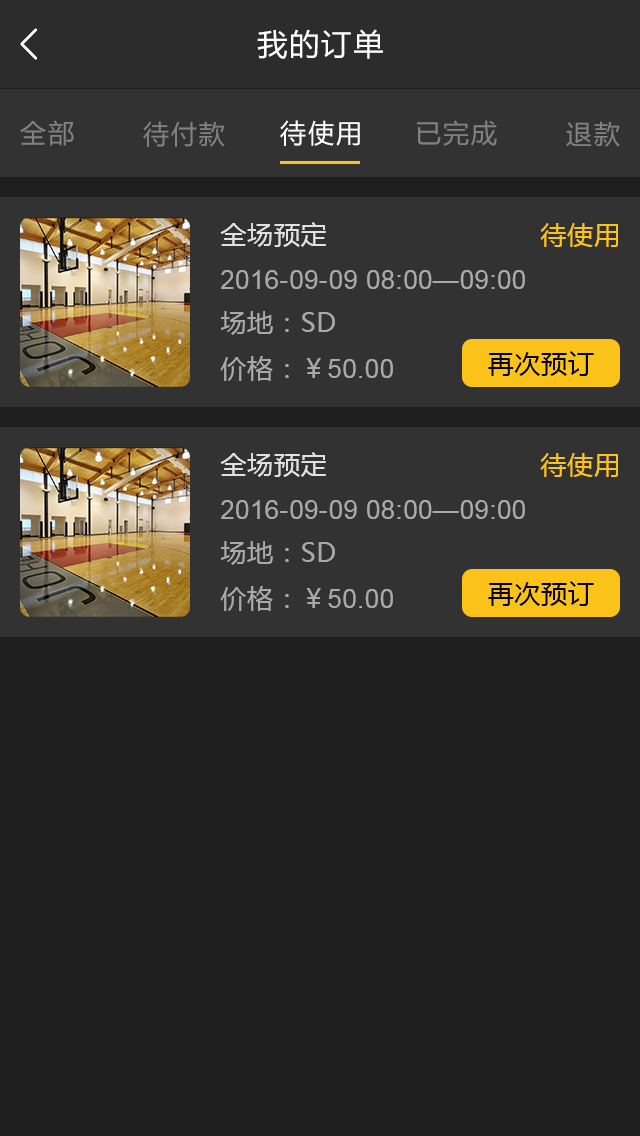
<style>
.page{position:relative;width:640px;height:1136px;background:#1e1e1e}
.page>*{position:absolute;margin:0}
.t1{font:30px "MicrosoftYaHei";letter-spacing:0.07em;color:#ffffff}
.t2{font:26px "MicrosoftYaHei";letter-spacing:0.07em;color:#818181}
.t3{font:26px "MicrosoftYaHei";letter-spacing:0.07em;color:#ffffff}
.t4{font:26px "MicrosoftYaHei";letter-spacing:0.03em;color:#e1e1e1}
.t5{font:26px "MicrosoftYaHei";letter-spacing:0.03em;color:#fbc219}
.t6{font:26px "ArialMT";letter-spacing:0.03em;color:#a9a9a9}
.t7{font:26px "MicrosoftYaHei";letter-spacing:0.03em;color:#a9a9a9}
.t8{font:26px "MicrosoftYaHei";letter-spacing:0.03em;color:#010101}
</style>
<div class="page">
<p class="t1" style="left:257px;top:29px;width:126px;height:30px">我的订单</p>
<p class="t2" style="left:20px;top:120px;width:54px;height:26px">全部</p>
<p class="t2" style="left:143px;top:121px;width:82px;height:26px">待付款</p>
<p class="t3" style="left:280px;top:120px;width:80px;height:26px">待使用</p>
<p class="t2" style="left:417px;top:120px;width:80px;height:26px">已完成</p>
<p class="t2" style="left:566px;top:121px;width:54px;height:26px">退款</p>
<p class="t4" style="left:220px;top:222px;width:106px;height:25px">全场预定</p>
<p class="t5" style="left:540px;top:223px;width:78px;height:24px">待使用</p>
<p class="t6" style="left:221px;top:270px;width:304px;height:19px">2016-09-09 08:00—09:00</p>
<p class="t7" style="left:220px;top:311px;width:115px;height:24px">场地：SD</p>
<p class="t8" style="left:488px;top:351px;width:106px;height:25px">再次预订</p>
<p class="t6" style="left:220px;top:355px;width:173px;height:26px"><span class="t7">价格：￥</span>50.00</p>
<p class="t4" style="left:220px;top:452px;width:106px;height:25px">全场预定</p>
<p class="t5" style="left:540px;top:453px;width:78px;height:24px">待使用</p>
<p class="t6" style="left:221px;top:500px;width:304px;height:19px">2016-09-09 08:00—09:00</p>
<p class="t7" style="left:220px;top:541px;width:115px;height:24px">场地：SD</p>
<p class="t8" style="left:488px;top:581px;width:106px;height:25px">再次预订</p>
<p class="t6" style="left:220px;top:585px;width:173px;height:26px"><span class="t7">价格：￥</span>50.00</p>
</div>
